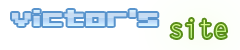
<style>
.page{position:relative;width:240px;height:50px;background:#ffffff}
.page>*{position:absolute;margin:0}
.t1{font:25px "04b09";letter-spacing:-0.01em;color:#c7dcf6}
</style>
<div class="page">
<p class="t1" style="left:12px;top:10px;width:146px;height:16px">victor's</p>
</div>
